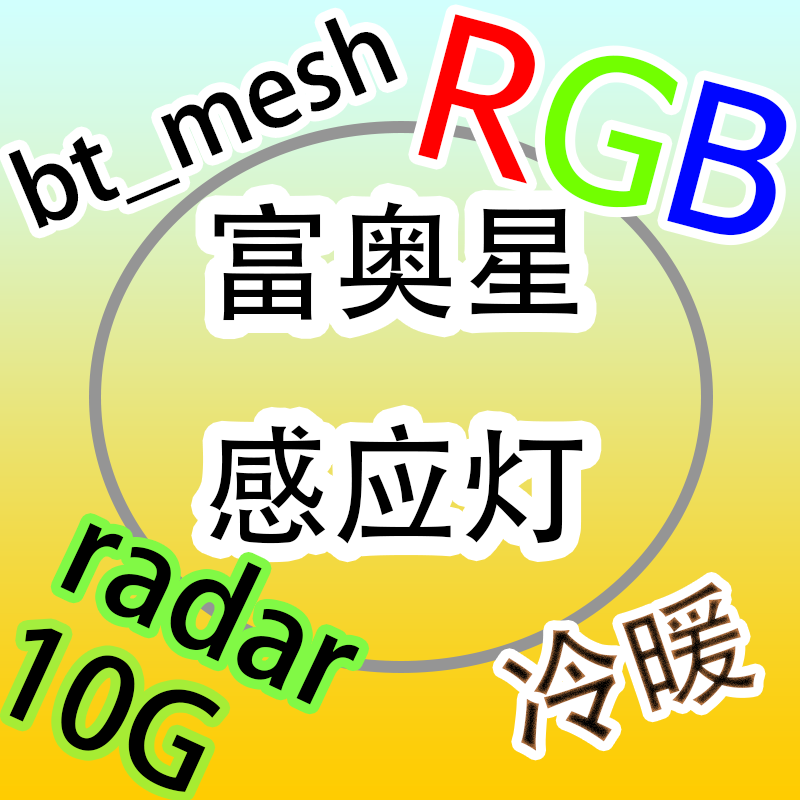
<style>
.page{position:relative;width:800px;height:800px}
.page>*{position:absolute;margin:0}
.t1{font:100px "AdobeHeitiStd-Regular";color:#000000}
.t2{font:200px "Tahoma";color:#ff0000}
.t3{font:200px "Tahoma";color:#72ff00}
.t4{font:200px "Tahoma";color:#0006ff}
.t5{font:128px "AdobeHeitiStd-Regular";color:#000000}
.t6{font:128px "AdobeHeitiStd-Regular"}
</style>
<div class="page">
<p class="t1" style="left:8px;top:17px;width:390px;height:212px;rotate:-23deg">bt_mesh</p>
<p class="t2" style="left:418px;top:14px;width:369px;height:222px;rotate:15deg">R<span class="t3">G</span><span class="t4">B</span></p>
<p class="t5" style="left:209px;top:201px;width:374px;height:343px">富奥星<br>感应灯</p>
<p class="t5" style="left:60px;top:523px;width:300px;height:182px;rotate:25deg">radar</p>
<p class="t6" style="left:502px;top:581px;width:254px;height:170px;rotate:-19deg">冷暖</p>
<p class="t5" style="left:9px;top:628px;width:212px;height:164px;rotate:25deg">10G</p>
</div>
